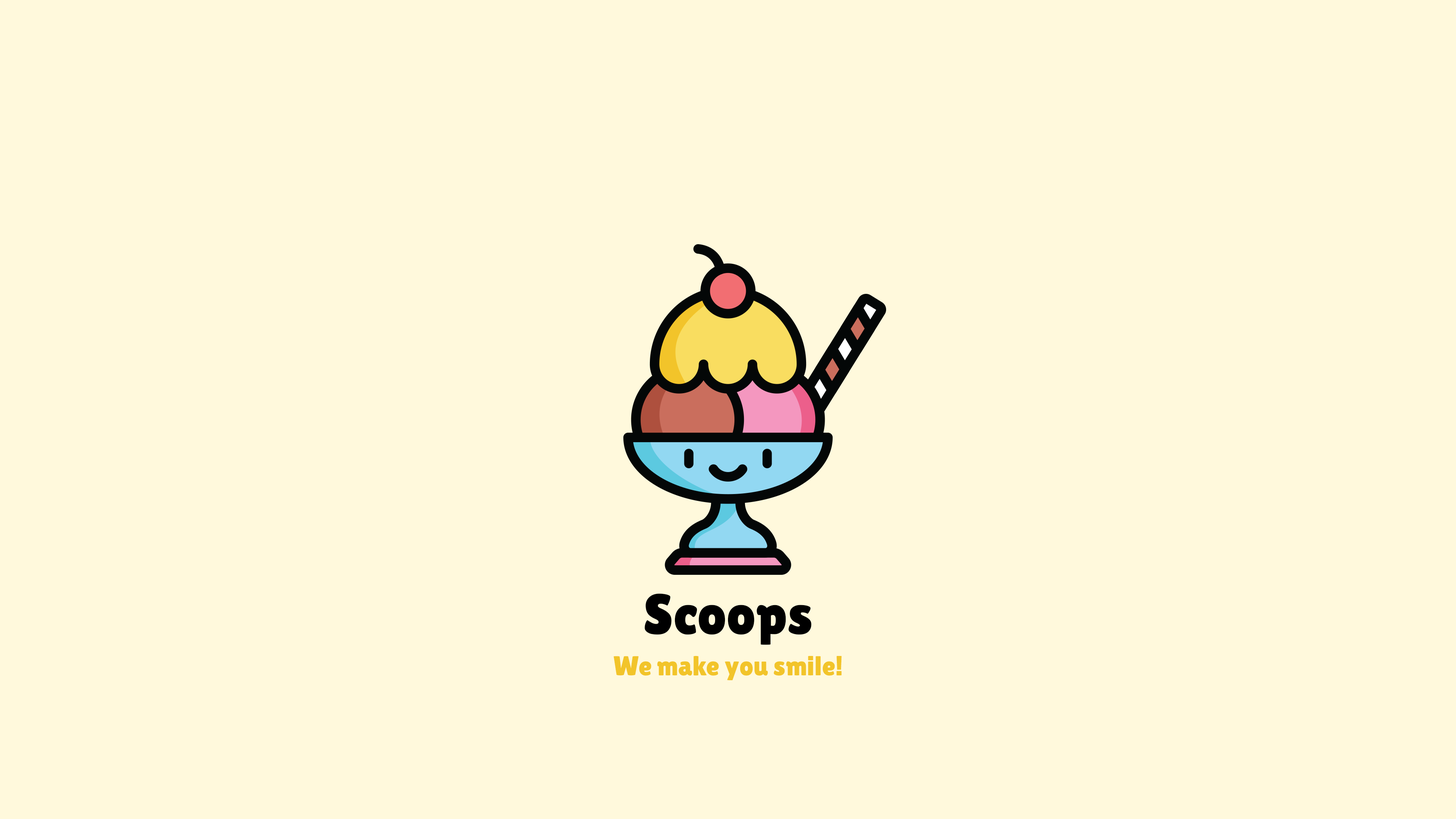
<style>
.page{position:relative;width:1456px;height:819px;background:#fff9dc}
.page>*{position:absolute;margin:0}
.t1{font:56.9px "LilitaOne";color:#000000}
.t2{font:27.3px "LilitaOne";color:#f2c42a}
</style>
<div class="page">
<p class="t1" style="left:645px;top:593px;width:166px;height:52px">Scoops</p>
<p class="t2" style="left:613px;top:656px;width:229px;height:24px">We make you smile!</p>
</div>
